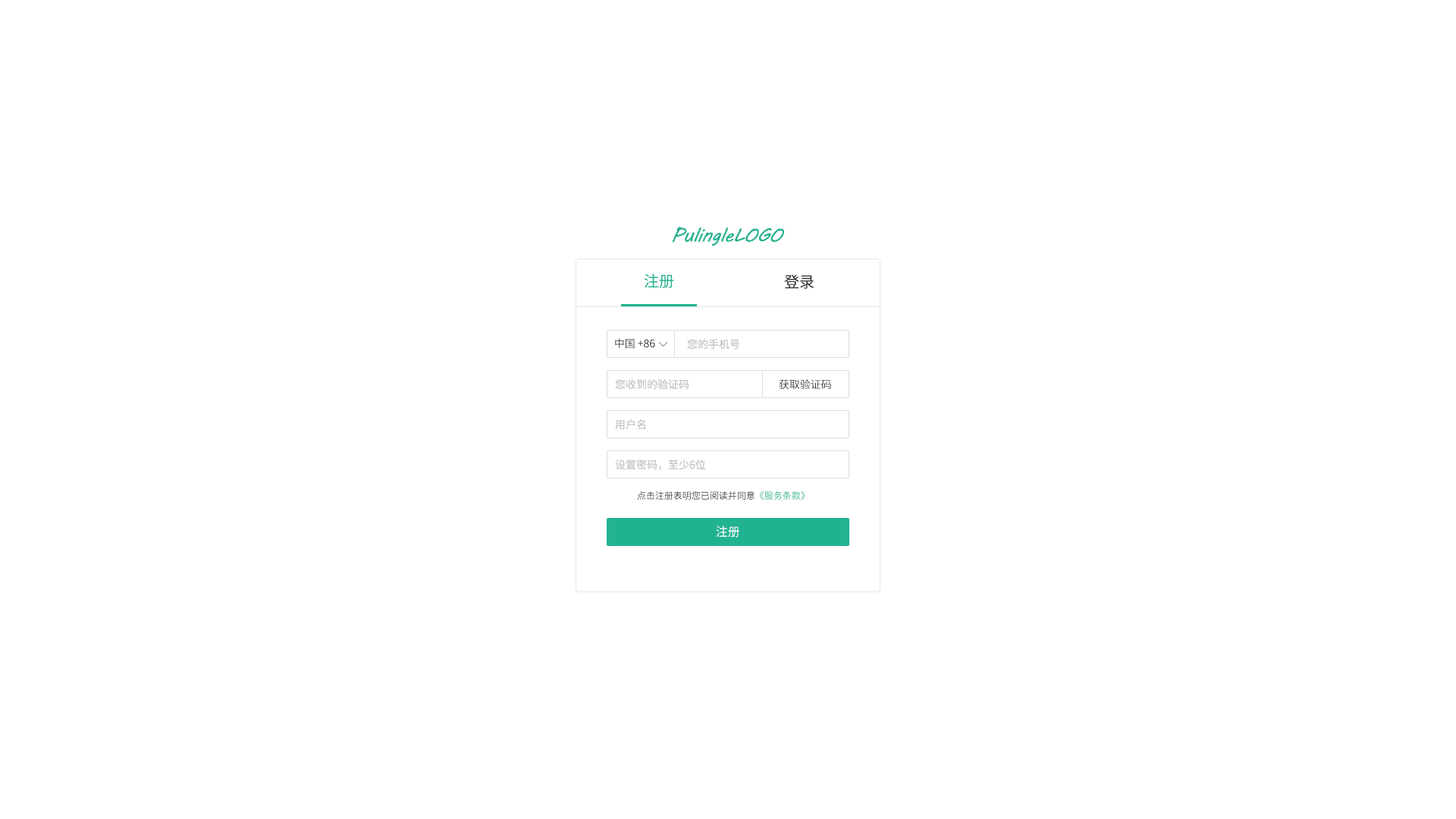
<style>
.page{position:relative;width:1456px;height:819px;background:#ffffff}
.page>*{position:absolute;margin:0}
.t1{font:18.6px "MVBoli";letter-spacing:-0.02em;color:#21b292;font-style:italic}
.t2{font:15.2px "SourceHanSansCN-Normal";color:#21b292}
.t3{font:15.2px "SourceHanSansCN-Normal";color:#333333}
.t4{font:10.6px "SourceHanSansCN-Regular";color:#333333}
.t5{font:10.6px "SourceHanSansCN-Regular";color:#c3c3c3}
.t6{font:9.1px "SourceHanSansCN-Regular";color:#333333}
.t7{font:9.1px "SourceHanSansCN-Regular";color:#21b292}
.t8{font:12.1px "SourceHanSansCN-Regular";color:#ffffff}
</style>
<div class="page">
<p class="t1" style="left:672px;top:226px;width:112px;height:20px">PulingleLOGO</p>
<p class="t2" style="left:644px;top:274px;width:30px;height:14px">注册</p>
<p class="t3" style="left:784px;top:275px;width:30px;height:14px">登录</p>
<p class="t4" style="left:615px;top:338px;width:40px;height:11px">中国 +86</p>
<p class="t5" style="left:687px;top:339px;width:53px;height:11px">您的手机号</p>
<p class="t5" style="left:615px;top:379px;width:74px;height:11px">您收到的验证码</p>
<p class="t4" style="left:779px;top:379px;width:52px;height:10px">获取验证码</p>
<p class="t5" style="left:615px;top:419px;width:30px;height:11px">用户名</p>
<p class="t5" style="left:615px;top:460px;width:91px;height:10px">设置密码，至少6位</p>
<p class="t6" style="left:637px;top:491px;width:168px;height:9px">点击注册表明您已阅读并同意<span class="t7">《服务条款》</span></p>
<p class="t8" style="left:716px;top:526px;width:23px;height:12px">注册</p>
</div>
